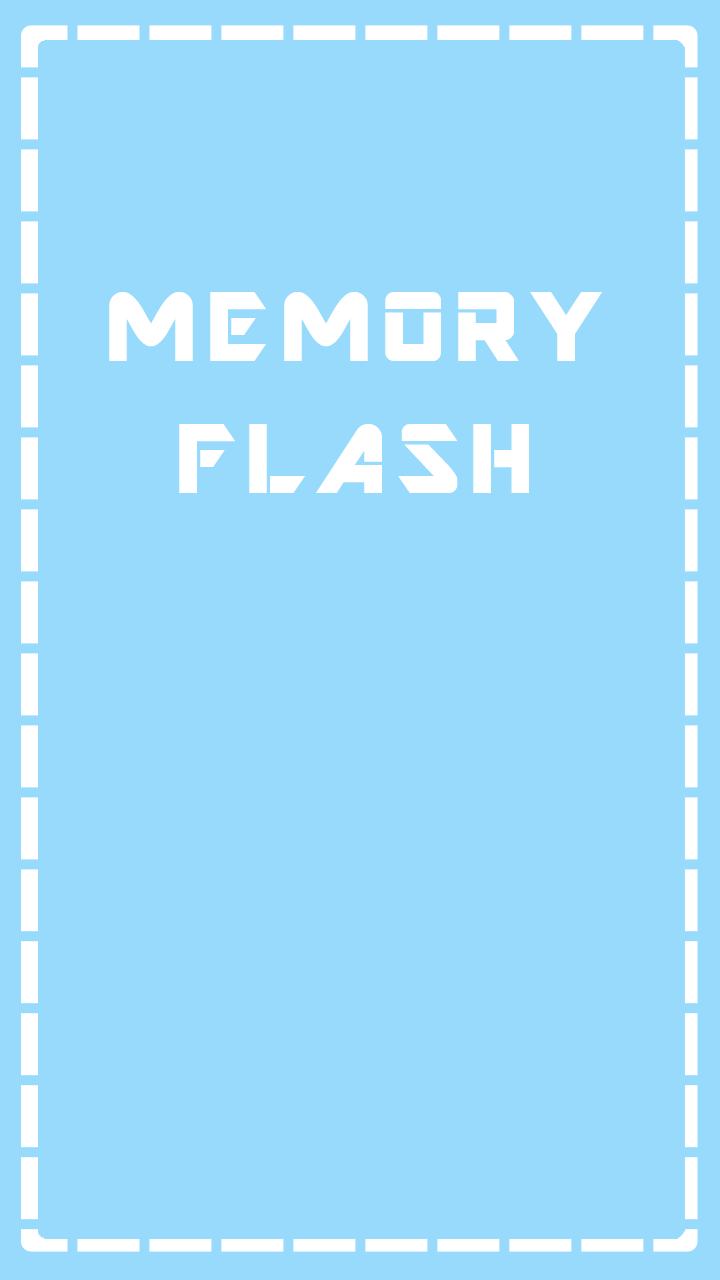
<style>
.page{position:relative;width:720px;height:1280px;background:#98dafc}
.page>*{position:absolute;margin:0}
.t1{font:110px "ARDESTINE";letter-spacing:0.1em;color:#ffffff}
</style>
<div class="page">
<p class="t1" style="left:109px;top:292px;width:493px;height:201px;text-align:center">MEMORY<br>FLASH</p>
</div>
